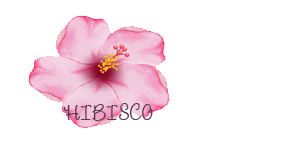
<style>
.page{position:relative;width:300px;height:150px;background:#ffffff}
.page>*{position:absolute;margin:0}
.t1{font:24px "CACPinafore";color:#5a3b58}
</style>
<div class="page">
<p class="t1" style="left:63px;top:103px;width:90px;height:18px">HIBISCO</p>
</div>
